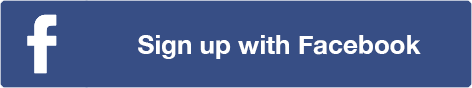
<style>
.page{position:relative;width:472px;height:88px;background:#374e85}
.page>*{position:absolute;margin:0}
.t1{font:26px "HelveticaNeue-Bold";color:#ffffff}
</style>
<div class="page">
<p class="t1" style="left:138px;top:35px;width:283px;height:24px">Sign up with Facebook</p>
</div>
